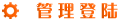
<style>
.page{position:relative;width:120px;height:22px;background:#ffffff}
.page>*{position:absolute;margin:0}
.t1{font:18px "FZCHYJW--GB1-0";letter-spacing:0.2em;color:#fb5e00}
</style>
<div class="page">
<p class="t1" style="left:36px;top:2px;width:82px;height:17px">管理登陆</p>
</div>
